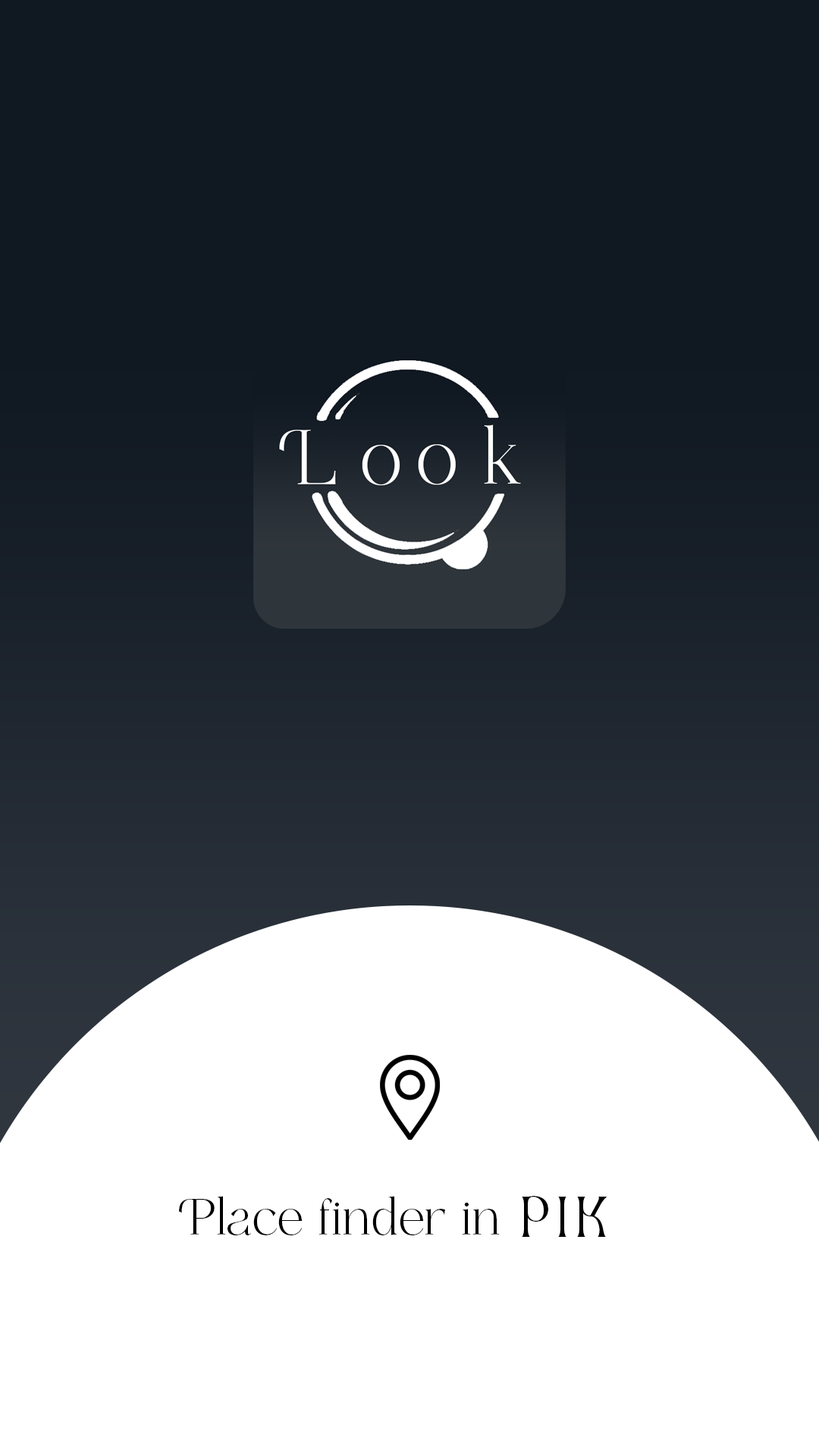
<style>
.page{position:relative;width:819px;height:1456px;background:#ffffff}
.page>*{position:absolute;margin:0}
.t1{font:50.6px "Ethereal-Thin";color:#000000}
.t2{font:50.6px "Aesthetic-Regular";letter-spacing:0.162em;color:#010101}
</style>
<div class="page">
<p class="t1" style="left:179px;top:1196px;width:321px;height:39px">Place finder in</p>
<p class="t2" style="left:522px;top:1196px;width:85px;height:41px">pik</p>
</div>
